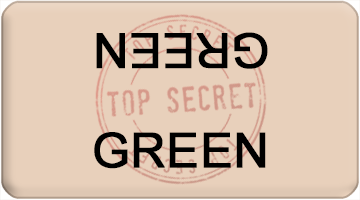
<style>
.page{position:relative;width:360px;height:200px;background:#e8d0bb}
.page>*{position:absolute;margin:0}
.t1{font:48px "ArialMT";color:#000000;font-weight:bold}
</style>
<div class="page">
<p class="t1" style="left:96px;top:32px;width:172px;height:37px;rotate:180deg">GREEN</p>
<p class="t1" style="left:94px;top:132px;width:172px;height:37px">GREEN</p>
</div>
